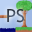
<style>
.page{position:relative;width:32px;height:32px}
.page>*{position:absolute;margin:0}
.t1{font:17.9px "TrebuchetMS"}
</style>
<div class="page">
<p class="t1" style="left:7px;top:9px;width:17px;height:14px">PS</p>
</div>
